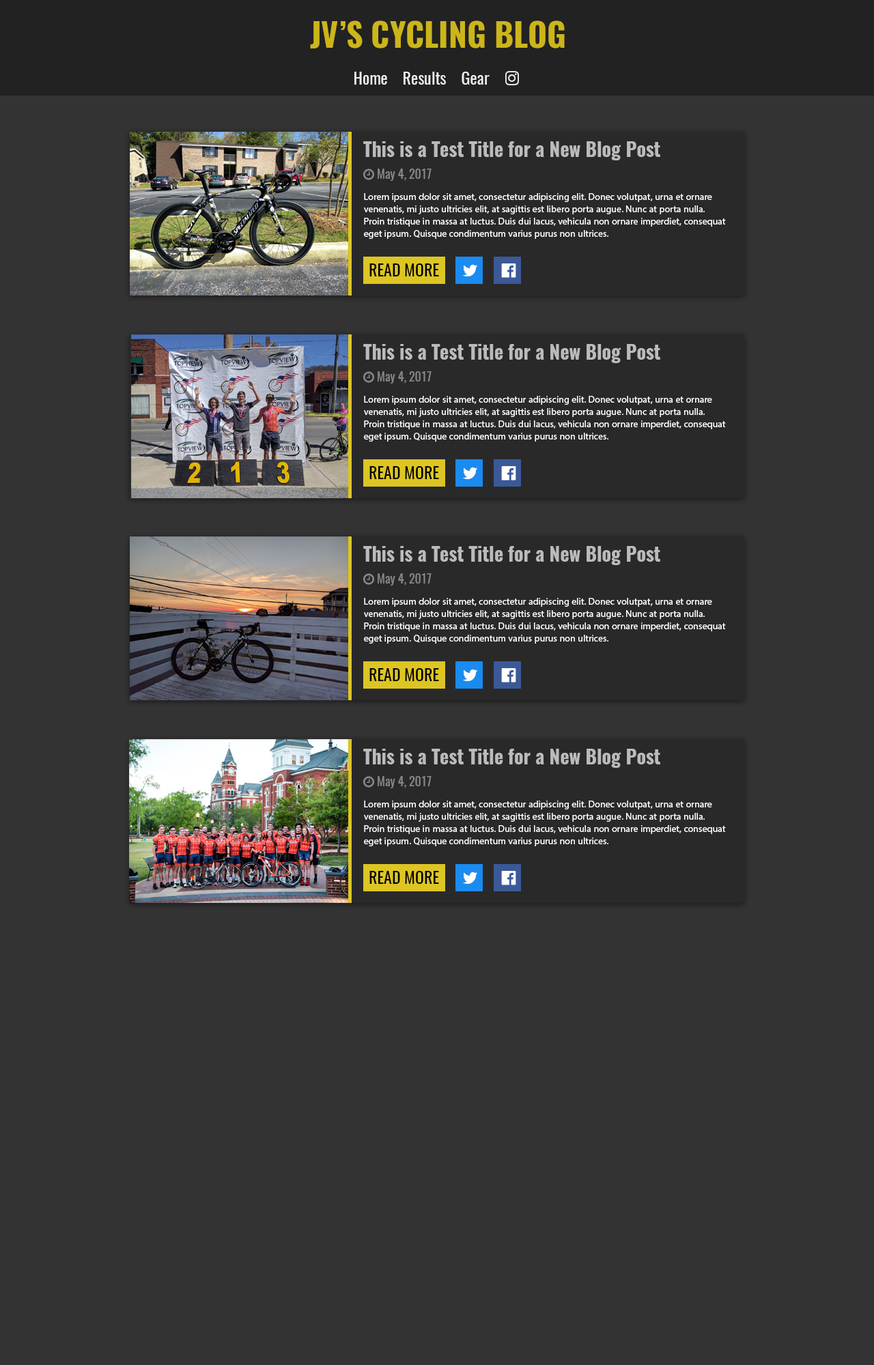
<style>
.page{position:relative;width:874px;height:1365px;background:#333333}
.page>*{position:absolute;margin:0}
.t1{font:32.8px "Oswald-Bold";color:#ccb51b;text-transform:uppercase}
.t2{font:16.4px "Oswald-Regular";color:#eeeeee}
.t3{font:19.1px "Oswald-Bold";color:#bbbbbb}
.t4{font:9.6px/12.3px "MyriadPro-Regular";color:#ffffff}
.t5{font:16.4px "Oswald-Regular";color:#000000;text-transform:uppercase}
</style>
<div class="page">
<p class="t1" style="left:310px;top:20px;width:254px;height:28px">JV’s Cycling Blog</p>
<p class="t2" style="left:354px;top:72px;width:135px;height:13px">Home    Results    Gear</p>
<p class="t3" style="left:363px;top:141px;width:297px;height:19px">This is a Test Title for a New Blog Post</p>
<p class="t4" style="left:364px;top:193px;width:361px;height:46px">Lorem ipsum dolor sit amet, consectetur adipiscing elit. Donec volutpat, urna et ornare<br>venenatis, mi justo ultricies elit, at sagittis est libero porta augue. Nunc at porta nulla.<br>Proin tristique in massa at luctus. Duis dui lacus, vehicula non ornare imperdiet, consequat<br>eget ipsum. Quisque condimentum varius purus non ultrices.</p>
<p class="t5" style="left:369px;top:263px;width:70px;height:13px">Read More</p>
<p class="t3" style="left:363px;top:344px;width:297px;height:19px">This is a Test Title for a New Blog Post</p>
<p class="t4" style="left:364px;top:396px;width:361px;height:46px">Lorem ipsum dolor sit amet, consectetur adipiscing elit. Donec volutpat, urna et ornare<br>venenatis, mi justo ultricies elit, at sagittis est libero porta augue. Nunc at porta nulla.<br>Proin tristique in massa at luctus. Duis dui lacus, vehicula non ornare imperdiet, consequat<br>eget ipsum. Quisque condimentum varius purus non ultrices.</p>
<p class="t5" style="left:369px;top:466px;width:70px;height:13px">Read More</p>
<p class="t3" style="left:363px;top:546px;width:297px;height:19px">This is a Test Title for a New Blog Post</p>
<p class="t4" style="left:364px;top:598px;width:361px;height:46px">Lorem ipsum dolor sit amet, consectetur adipiscing elit. Donec volutpat, urna et ornare<br>venenatis, mi justo ultricies elit, at sagittis est libero porta augue. Nunc at porta nulla.<br>Proin tristique in massa at luctus. Duis dui lacus, vehicula non ornare imperdiet, consequat<br>eget ipsum. Quisque condimentum varius purus non ultrices.</p>
<p class="t5" style="left:369px;top:668px;width:70px;height:13px">Read More</p>
<p class="t3" style="left:363px;top:749px;width:297px;height:19px">This is a Test Title for a New Blog Post</p>
<p class="t4" style="left:364px;top:801px;width:361px;height:45px">Lorem ipsum dolor sit amet, consectetur adipiscing elit. Donec volutpat, urna et ornare<br>venenatis, mi justo ultricies elit, at sagittis est libero porta augue. Nunc at porta nulla.<br>Proin tristique in massa at luctus. Duis dui lacus, vehicula non ornare imperdiet, consequat<br>eget ipsum. Quisque condimentum varius purus non ultrices.</p>
<p class="t5" style="left:369px;top:871px;width:70px;height:13px">Read More</p>
</div>
